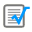
<style>
.page{position:relative;width:32px;height:32px;background:#ffffff}
.page>*{position:absolute;margin:0}
.t1{font:22.6px "HaanYHeadB";color:#0099ff;scale:1.11 1}
</style>
<div class="page">
<p class="t1" style="left:11px;top:6px;width:19px;height:19px">√</p>
</div>
